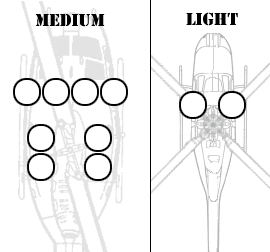
<style>
.page{position:relative;width:270px;height:252px;background:#ffffff}
.page>*{position:absolute;margin:0}
.t1{font:18px "Stencil";color:#000000}
</style>
<div class="page">
<p class="t1" style="left:35px;top:14px;width:70px;height:13px">Medium</p>
<p class="t1" style="left:186px;top:12px;width:52px;height:14px">LIGHT</p>
</div>
